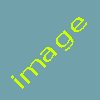
<style>
.page{position:relative;width:100px;height:100px;background:#71a2ab}
.page>*{position:absolute;margin:0}
.t1{font:23.7px "Verdana";color:#ccff00;scale:1.33 1}
</style>
<div class="page">
<p class="t1" style="left:11px;top:17px;width:76px;height:72px;rotate:-45deg">image</p>
</div>
